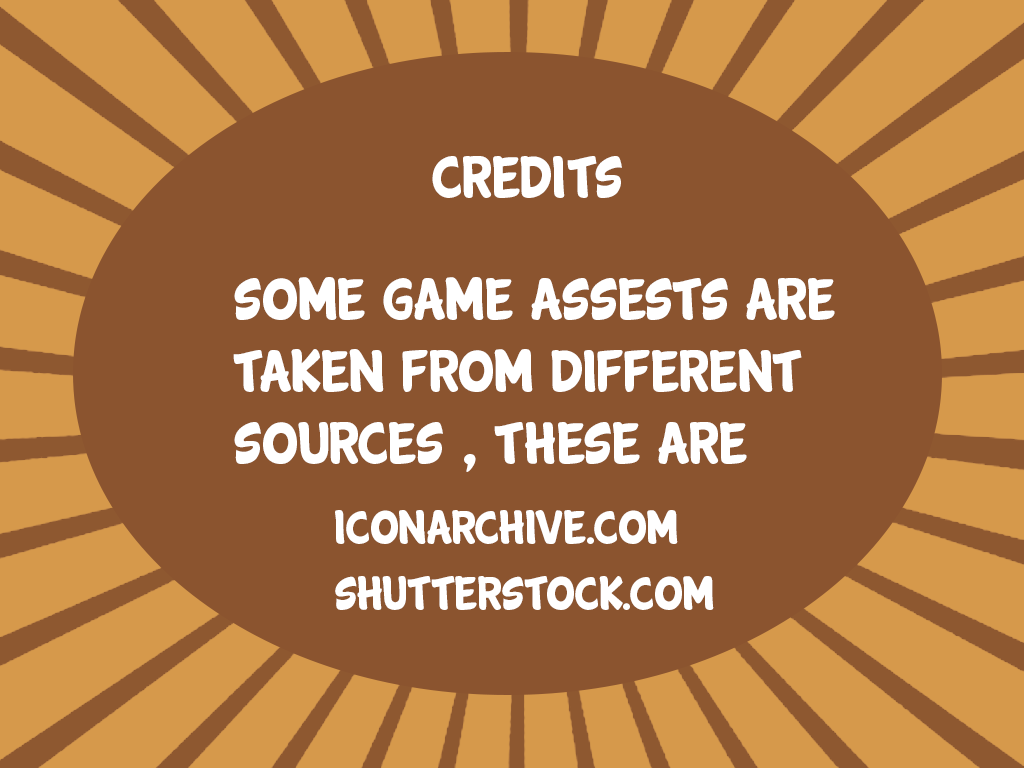
<style>
.page{position:relative;width:1024px;height:768px;background:#8b542f}
.page>*{position:absolute;margin:0}
.t1{font:60px "Cartwheel";color:#ffffff}
.t2{font:48px "Cartwheel";color:#ffffff}
</style>
<div class="page">
<p class="t1" style="left:432px;top:156px;width:190px;height:42px">credits</p>
<p class="t1" style="left:233px;top:277px;width:602px;height:195px">some game assests are taken from different sources , these are</p>
<p class="t2" style="left:335px;top:510px;width:343px;height:34px">iconarchive.com</p>
<p class="t2" style="left:335px;top:576px;width:379px;height:34px">shutterstock.com</p>
</div>
